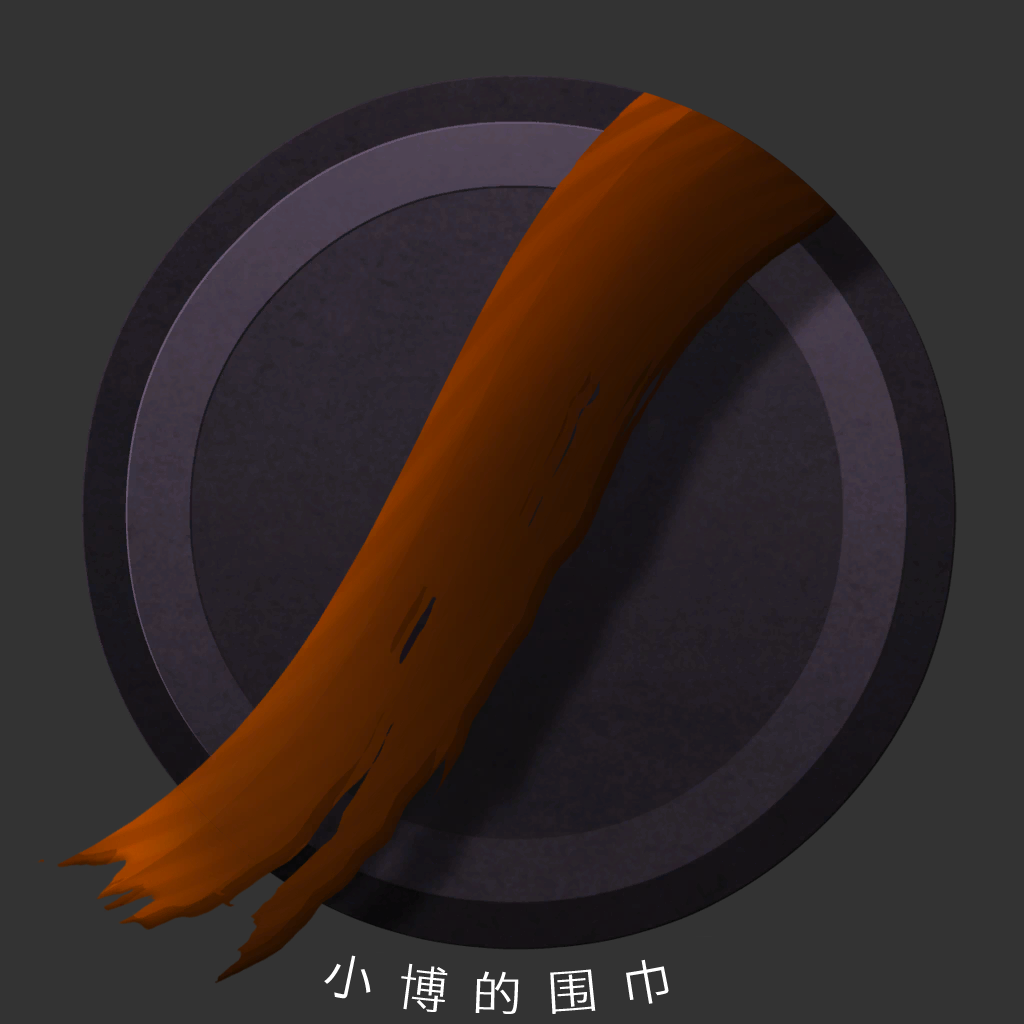
<style>
.page{position:relative;width:1024px;height:1024px;background:#333333}
.page>*{position:absolute;margin:0}
.t1{font:48px "SourceHanSansSC-Normal";letter-spacing:0.5em;color:#ffffff}
</style>
<div class="page">
<p class="t1" style="left:324px;top:955px;width:345px;height:59px">小博的围巾</p>
</div>
